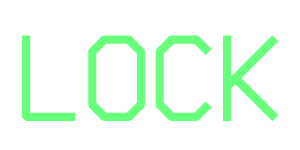
<style>
.page{position:relative;width:300px;height:150px;background:#ffffff}
.page>*{position:absolute;margin:0}
.t1{font:122.3px "HornetDisplay-Bold";color:#67ff7b}
</style>
<div class="page">
<p class="t1" style="left:22px;top:35px;width:257px;height:86px">LOCK</p>
</div>
